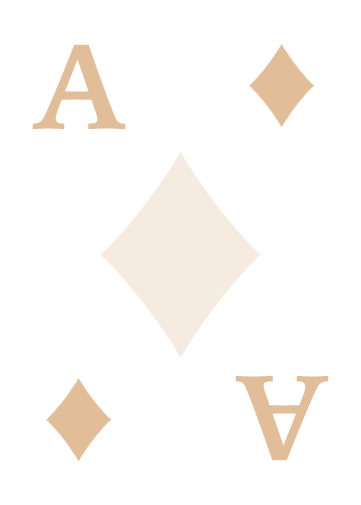
<style>
.page{position:relative;width:361px;height:505px;background:#ffffff}
.page>*{position:absolute;margin:0}
.t1{font:120px "IowanOldStyle-Bold";letter-spacing:-0.05em;color:#e1be98}
</style>
<div class="page">
<p class="t1" style="left:32px;top:44px;width:94px;height:85px">A</p>
<p class="t1" style="left:235px;top:376px;width:94px;height:85px;rotate:180deg">A</p>
</div>
